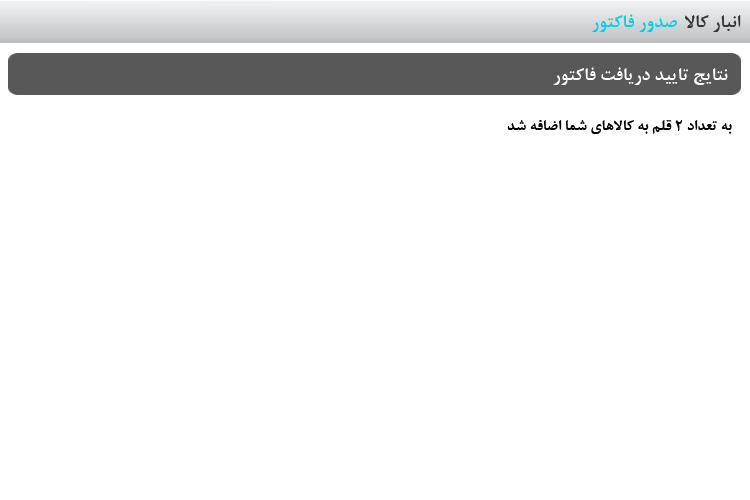
<style>
.page{position:relative;width:750px;height:500px;background:#ffffff}
.page>*{position:absolute;margin:0}
.t1{font:20px "BNazaninBold";color:#00d2e5}
.t2{font:20px "BNazaninBold";color:#333333}
.t3{font:20px "BNazaninBold";color:#ffffff}
.t4{font:16.7px "BNazaninBold";color:#000000}
</style>
<div class="page">
<p class="t1" style="left:592px;top:14px;width:85px;height:18px">صدور فاکتور</p>
<p class="t2" style="left:685px;top:15px;width:56px;height:17px">انبار کالا</p>
<p class="t3" style="left:553px;top:67px;width:175px;height:18px">نتایج تایید دریافت فاکتور</p>
<p class="t4" style="left:507px;top:120px;width:225px;height:14px">به تعداد 2 قلم به کالاهای شما اضافه شد</p>
</div>
